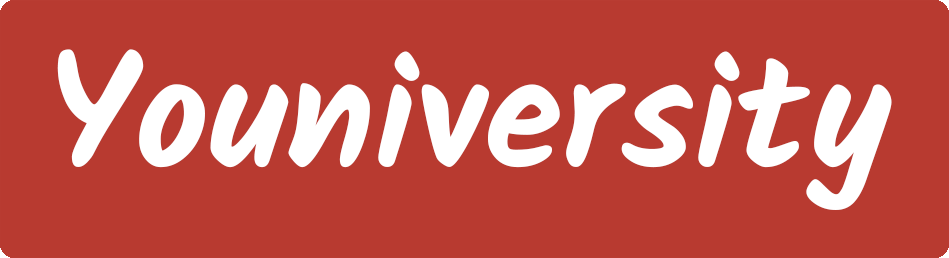
<style>
.page{position:relative;width:949px;height:258px;background:#b83a30}
.page>*{position:absolute;margin:0}
.t1{font:160px "Kalam-Bold";color:#ffffff}
</style>
<div class="page">
<p class="t1" style="left:57px;top:49px;width:835px;height:161px">Youniversity</p>
</div>
